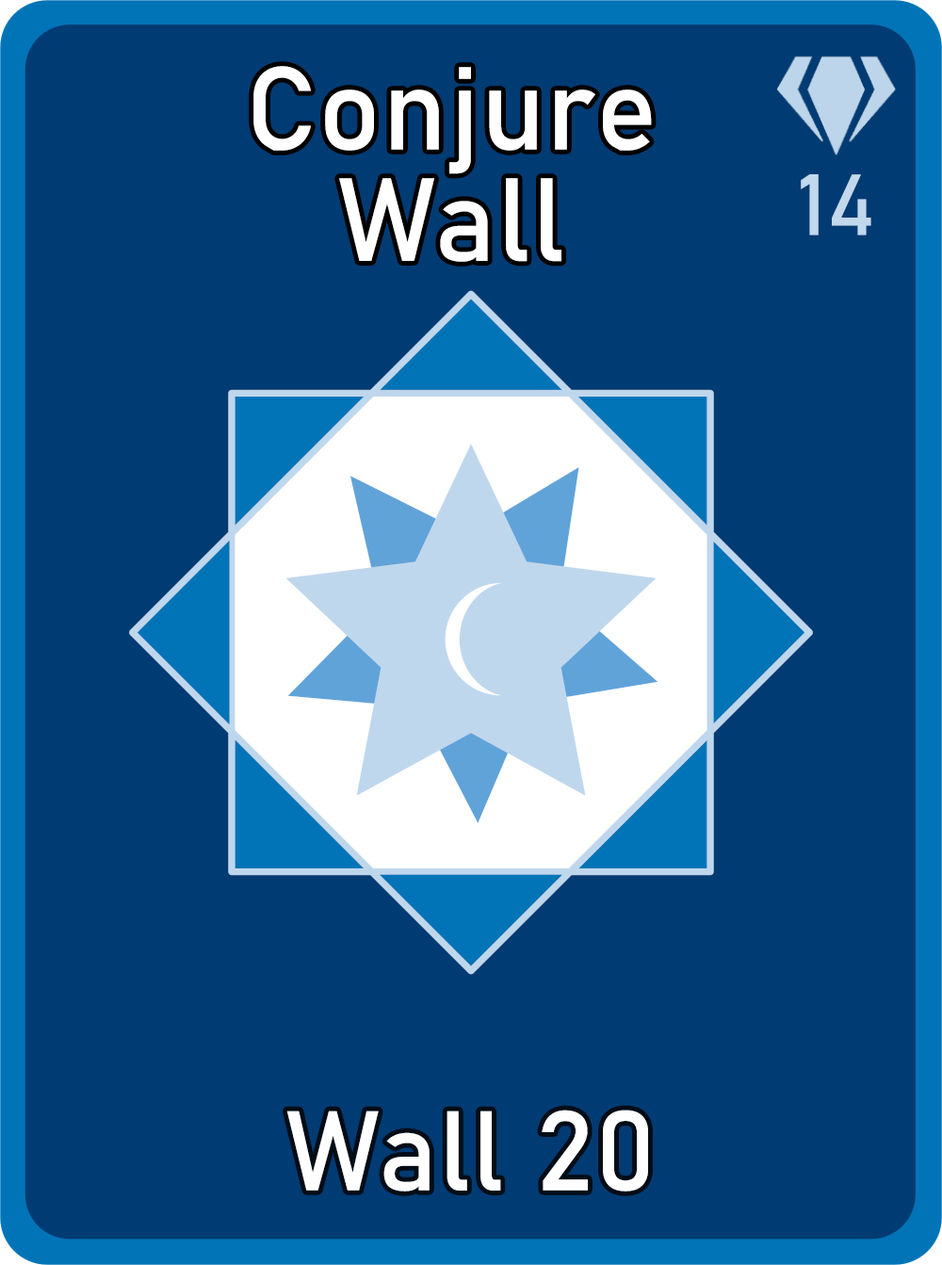
<style>
.page{position:relative;width:942px;height:1265px;background:#003b73}
.page>*{position:absolute;margin:0}
.t1{font:115.9px/111.3px "Bahnschrift";letter-spacing:0.01em;color:#ffffff}
.t2{font:85px "Bahnschrift";letter-spacing:0.01em;color:#c1d8ed}
.t3{font:111.3px "Bahnschrift";letter-spacing:0.01em;color:#ffffff}
</style>
<div class="page">
<p class="t1" style="left:253px;top:66px;width:399px;height:196px;text-align:center">Conjure <br>Wall</p>
<p class="t2" style="left:801px;top:174px;width:71px;height:62px">14</p>
<p class="t3" style="left:286px;top:1110px;width:362px;height:82px">Wall 20</p>
</div>
